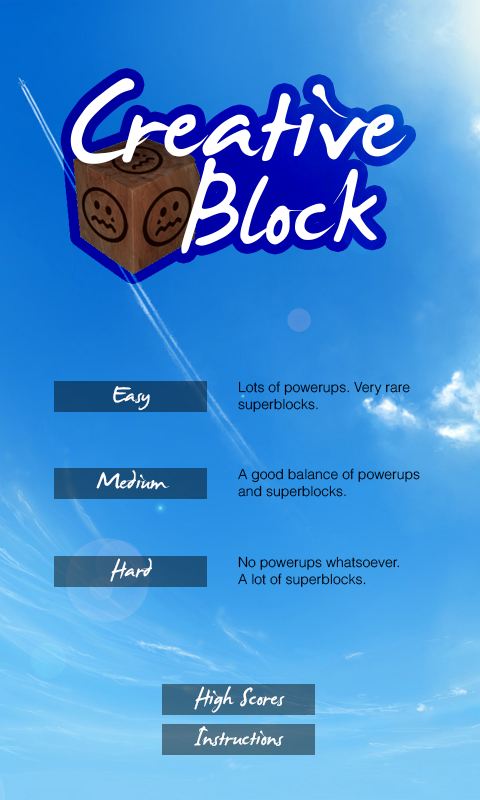
<style>
.page{position:relative;width:480px;height:800px}
.page>*{position:absolute;margin:0}
.t1{font:192.3px "JamesFajardo";color:#ffffff}
.t2{font:168px "JamesFajardo";color:#ffffff}
.t3{font:36px "JamesFajardo";color:#ffffff}
.t4{font:14px "Helvetica-Light";color:#000000}
</style>
<div class="page">
<p class="t1" style="left:70px;top:78px;width:337px;height:86px">Creative</p>
<p class="t2" style="left:181px;top:157px;width:196px;height:97px">Block</p>
<p class="t3" style="left:113px;top:386px;width:37px;height:25px">Easy</p>
<p class="t4" style="left:238px;top:381px;width:172px;height:31px">Lots of powerups. Very rare<br>superblocks.</p>
<p class="t3" style="left:96px;top:470px;width:74px;height:20px">Medium</p>
<p class="t4" style="left:238px;top:468px;width:182px;height:31px">A good balance of powerups<br>and superblocks.</p>
<p class="t3" style="left:110px;top:558px;width:42px;height:24px">Hard</p>
<p class="t4" style="left:238px;top:556px;width:161px;height:31px">No powerups whatsoever.<br>A lot of superblocks.</p>
<p class="t3" style="left:194px;top:686px;width:91px;height:27px">High Scores</p>
<p class="t3" style="left:194px;top:726px;width:90px;height:20px">Instructions</p>
</div>
